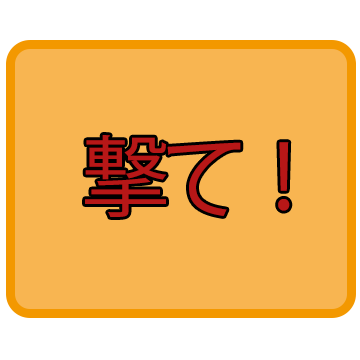
<style>
.page{position:relative;width:360px;height:360px;background:#f8b551}
.page>*{position:absolute;margin:0}
.t1{font:88px "KozGoPr6N-Regular";letter-spacing:-0.1em;color:#b71717}
.t2{font:48px "KozGoPr6N-Regular";letter-spacing:-0.1em;color:#b71717}
</style>
<div class="page">
<p class="t1" style="left:85px;top:135px;width:205px;height:82px"><span class="t2"><br>　　</span>撃て！</p>
</div>
